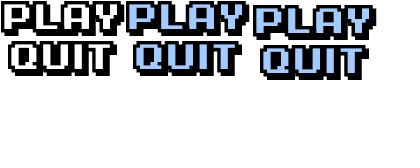
<style>
.page{position:relative;width:420px;height:168px;background:#ffffff}
.page>*{position:absolute;margin:0}
.t1{font:36px "KarmaticArcade";color:#000000}
</style>
<div class="page">
<p class="t1" style="left:1px;top:1px;width:124px;height:35px">PLAY</p>
<p class="t1" style="left:126px;top:1px;width:124px;height:35px">PLAY</p>
<p class="t1" style="left:253px;top:5px;width:124px;height:35px">PLAY</p>
<p class="t1" style="left:8px;top:41px;width:109px;height:35px">QUIT</p>
<p class="t1" style="left:133px;top:41px;width:109px;height:35px">QUIT</p>
<p class="t1" style="left:260px;top:45px;width:109px;height:35px">QUIT</p>
</div>
